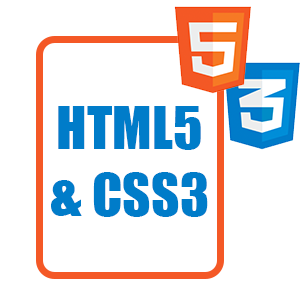
<style>
.page{position:relative;width:300px;height:300px;background:#ffffff}
.page>*{position:absolute;margin:0}
.t1{font:55.4px "Impact";color:#007cc9}
.t2{font:55.4px "Impact";color:#000000}
</style>
<div class="page">
<p class="t1" style="left:51px;top:106px;width:157px;height:111px;text-align:center"><span class="t2"><br></span>HTML5<br>&amp; CSS3</p>
</div>
